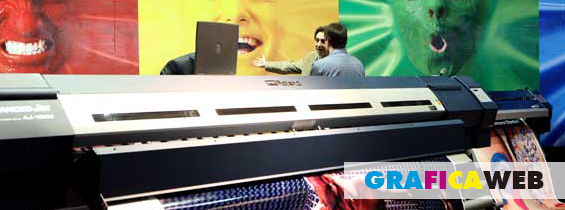
<style>
.page{position:relative;width:565px;height:210px}
.page>*{position:absolute;margin:0}
.t1{font:24px "Futura-ExtraBold";color:#009bdb}
.t2{font:24px "Futura-ExtraBold";color:#ba007c}
.t3{font:24px "Futura-ExtraBold";color:#feee00}
.t4{font:24px "Futura-ExtraBold";color:#211915}
</style>
<div class="page">
<p class="t1" style="left:364px;top:171px;width:180px;height:18px">GRA<span class="t2">FI</span><span class="t3">CA</span><span class="t4">WEB</span></p>
</div>
